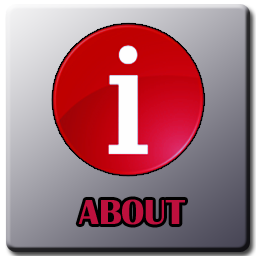
<style>
.page{position:relative;width:256px;height:256px}
.page>*{position:absolute;margin:0}
.t1{font:36px "BritannicBold";color:#bd103d}
</style>
<div class="page">
<p class="t1" style="left:78px;top:199px;width:107px;height:26px">ABOUT</p>
</div>
